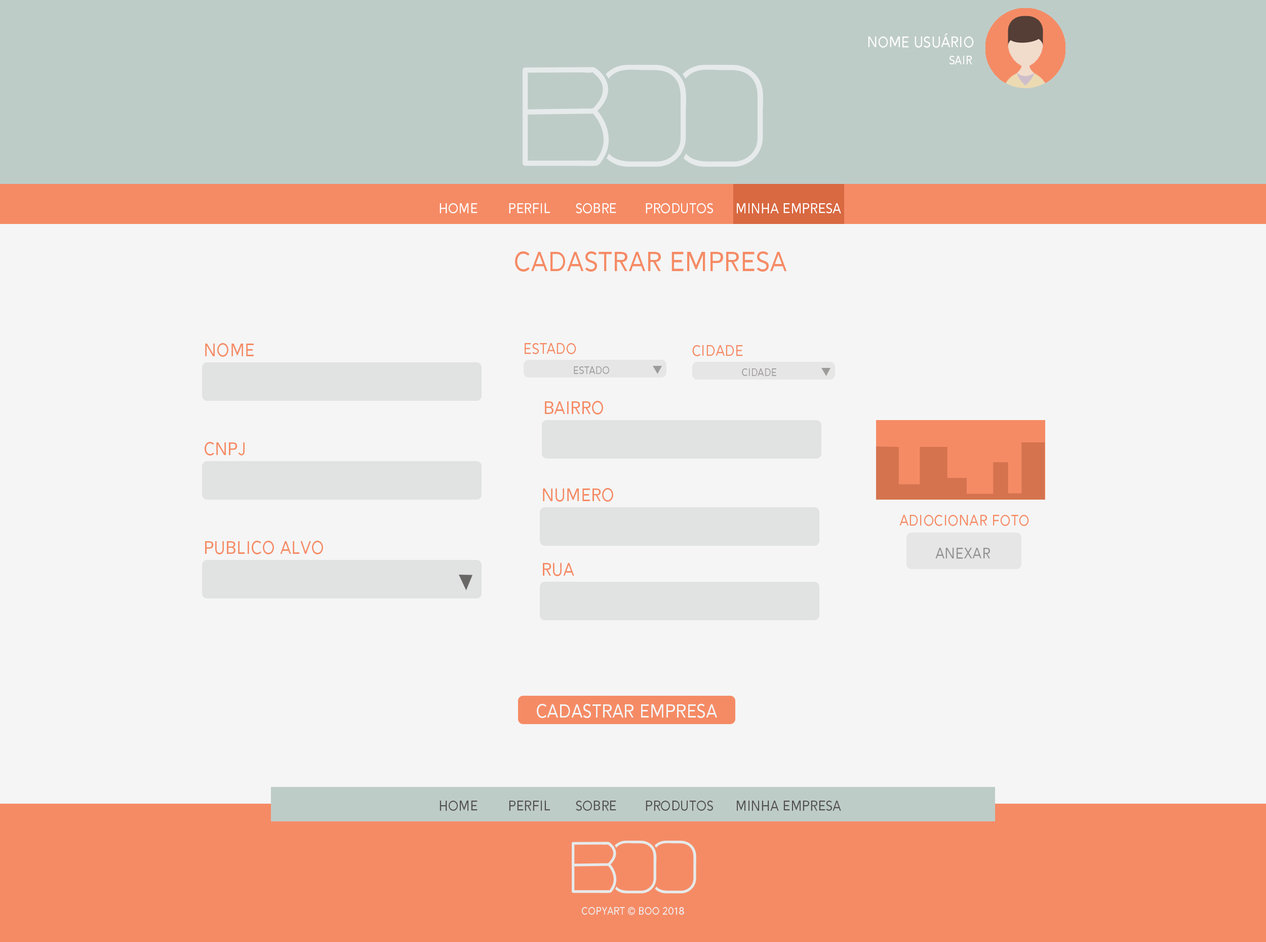
<style>
.page{position:relative;width:1266px;height:942px;background:#f5f5f5}
.page>*{position:absolute;margin:0}
.t1{font:18.3px "Alesand-Regular";color:#fffefe}
.t2{font:14.1px "Alesand-Regular";color:#fffefe}
.t3{font:16.9px "Alesand-Regular";color:#fffefe}
.t4{font:33.8px "Alesand-Regular";color:#f58b65}
.t5{font:21.9px "Alesand-Regular";color:#f58b65}
.t6{font:18.3px "Alesand-Regular";color:#f58b65}
.t7{font:12.4px "Alesand-Regular";color:#9e9b9b}
.t8{font:18.3px "Alesand-Regular";color:#929191}
.t9{font:22.4px "Alesand-Regular";color:#f5f5f5}
.t10{font:16.9px "Alesand-Regular";color:#525050}
.t11{font:12.7px "Alesand-Regular";color:#efefef}
</style>
<div class="page">
<p class="t1" style="left:868px;top:33px;width:106px;height:15px">Nome Usuário</p>
<p class="t2" style="left:950px;top:56px;width:23px;height:9px">Sair</p>
<p class="t3" style="left:440px;top:203px;width:38px;height:10px">HOME</p>
<p class="t3" style="left:509px;top:203px;width:41px;height:10px">PERFIL</p>
<p class="t3" style="left:576px;top:203px;width:40px;height:10px">SOBRE</p>
<p class="t3" style="left:646px;top:203px;width:67px;height:10px">PRODUTOS</p>
<p class="t3" style="left:737px;top:203px;width:104px;height:10px">MINHA EMPRESA</p>
<p class="t4" style="left:515px;top:251px;width:272px;height:21px">CADASTRAR EMPRESA</p>
<p class="t5" style="left:205px;top:343px;width:49px;height:14px">Nome</p>
<p class="t6" style="left:525px;top:343px;width:51px;height:11px">ESTADO</p>
<p class="t6" style="left:692px;top:345px;width:51px;height:11px">CIDADE</p>
<p class="t7" style="left:574px;top:366px;width:35px;height:8px">ESTADO</p>
<p class="t7" style="left:742px;top:368px;width:35px;height:8px">CIDADE</p>
<p class="t5" style="left:545px;top:401px;width:58px;height:13px">BAIRRO</p>
<p class="t5" style="left:205px;top:442px;width:40px;height:13px">CNPJ</p>
<p class="t5" style="left:543px;top:488px;width:70px;height:13px">NUMERO</p>
<p class="t6" style="left:900px;top:515px;width:129px;height:11px">ADIOCIONAR FOTO</p>
<p class="t5" style="left:205px;top:540px;width:118px;height:14px">pUBLICO ALVO</p>
<p class="t8" style="left:936px;top:548px;width:54px;height:11px">ANEXAR</p>
<p class="t5" style="left:543px;top:563px;width:31px;height:13px">RUA</p>
<p class="t9" style="left:537px;top:704px;width:180px;height:14px">CADASTRAR EMPRESA</p>
<p class="t10" style="left:440px;top:800px;width:38px;height:10px">HOME</p>
<p class="t10" style="left:509px;top:800px;width:41px;height:10px">PERFIL</p>
<p class="t10" style="left:576px;top:800px;width:40px;height:10px">SOBRE</p>
<p class="t10" style="left:646px;top:800px;width:67px;height:10px">PRODUTOS</p>
<p class="t10" style="left:737px;top:800px;width:104px;height:10px">MINHA EMPRESA</p>
<p class="t11" style="left:582px;top:907px;width:102px;height:8px">copyart © boo 2018</p>
</div>
